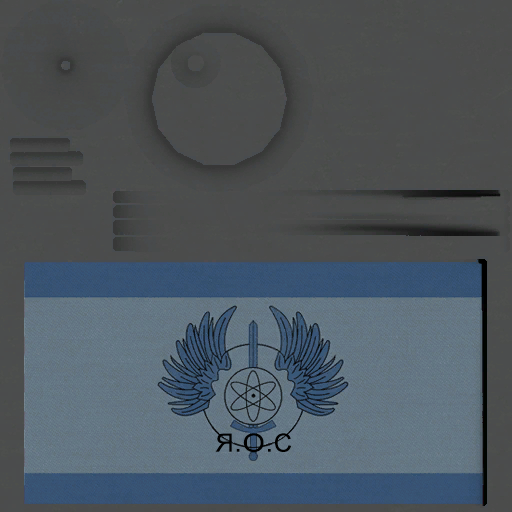
<style>
.page{position:relative;width:512px;height:512px}
.page>*{position:absolute;margin:0}
.t1{font:25px "ArialMT";letter-spacing:0.04em;color:#000000}
.t2{font:25px "ArialMT";letter-spacing:0.04em;color:#000000;scale:1.14 1}
</style>
<div class="page">
<p class="t1" style="left:215px;top:433px;width:76px;height:19px">Я.<span class="t2">О</span>.С</p>
</div>
